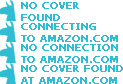
<style>
.page{position:relative;width:123px;height:84px;background:#ffffff}
.page>*{position:absolute;margin:0}
.t1{font:10px "Tahoma";color:#2ebdd2;font-weight:bold}
</style>
<div class="page">
<p class="t1" style="left:21px;top:2px;width:58px;height:19px">NO COVER<br>FOUND</p>
<p class="t1" style="left:21px;top:23px;width:97px;height:19px">CONNECTING<br>TO AMAZON.COM</p>
<p class="t1" style="left:21px;top:44px;width:97px;height:19px">NO CONNECTION<br>TO AMAZON.COM</p>
<p class="t1" style="left:21px;top:65px;width:102px;height:19px">NO COVER FOUND<br>AT AMAZON.COM</p>
</div>
